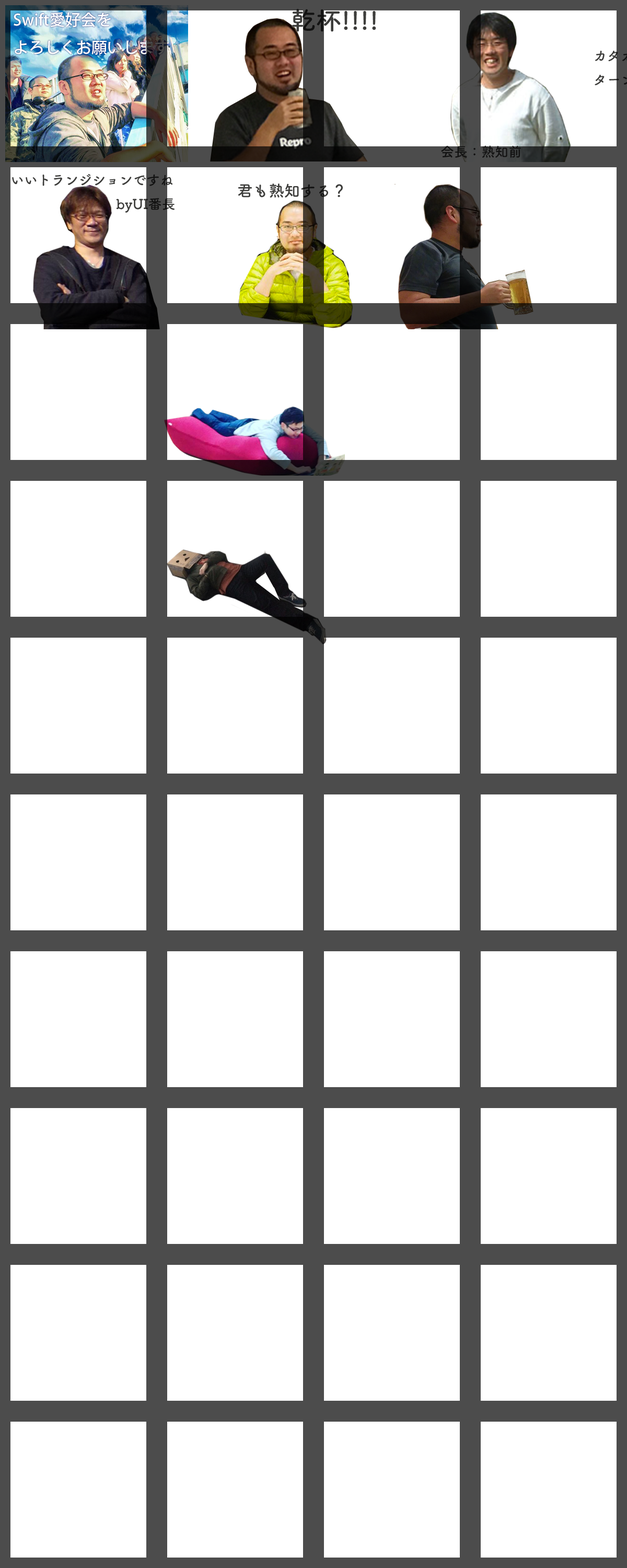
<style>
.page{position:relative;width:627px;height:1568px;background:#ffffff}
.page>*{position:absolute;margin:0}
.t1{font:15.7px "KozGoPr6N-Medium";color:#ffffff}
.t2{font:25.1px "TsukuBRdGothic-Bold";color:#3d3d3b}
.t3{font:13.6px "TsukuBRdGothic-Bold";color:#121212}
.t4{font:13.6px "TsukuBRdGothic-Bold";color:#3d3d3b}
.t5{font:15.7px "TsukuBRdGothic-Bold";color:#3d3d3b}
</style>
<div class="page">
<p class="t1" style="left:14px;top:12px;width:155px;height:43px">Swift愛好会を<br>よろしくお願いします</p>
<p class="t2" style="left:292px;top:9px;width:84px;height:23px">乾杯!!!!</p>
<p class="t3" style="left:441px;top:145px;width:80px;height:13px">会長：熟知前</p>
<p class="t4" style="left:12px;top:174px;width:163px;height:39px">いいトランジションですね<br>        byUI番長</p>
<p class="t5" style="left:238px;top:183px;width:105px;height:15px">君も熟知する？</p>
</div>
